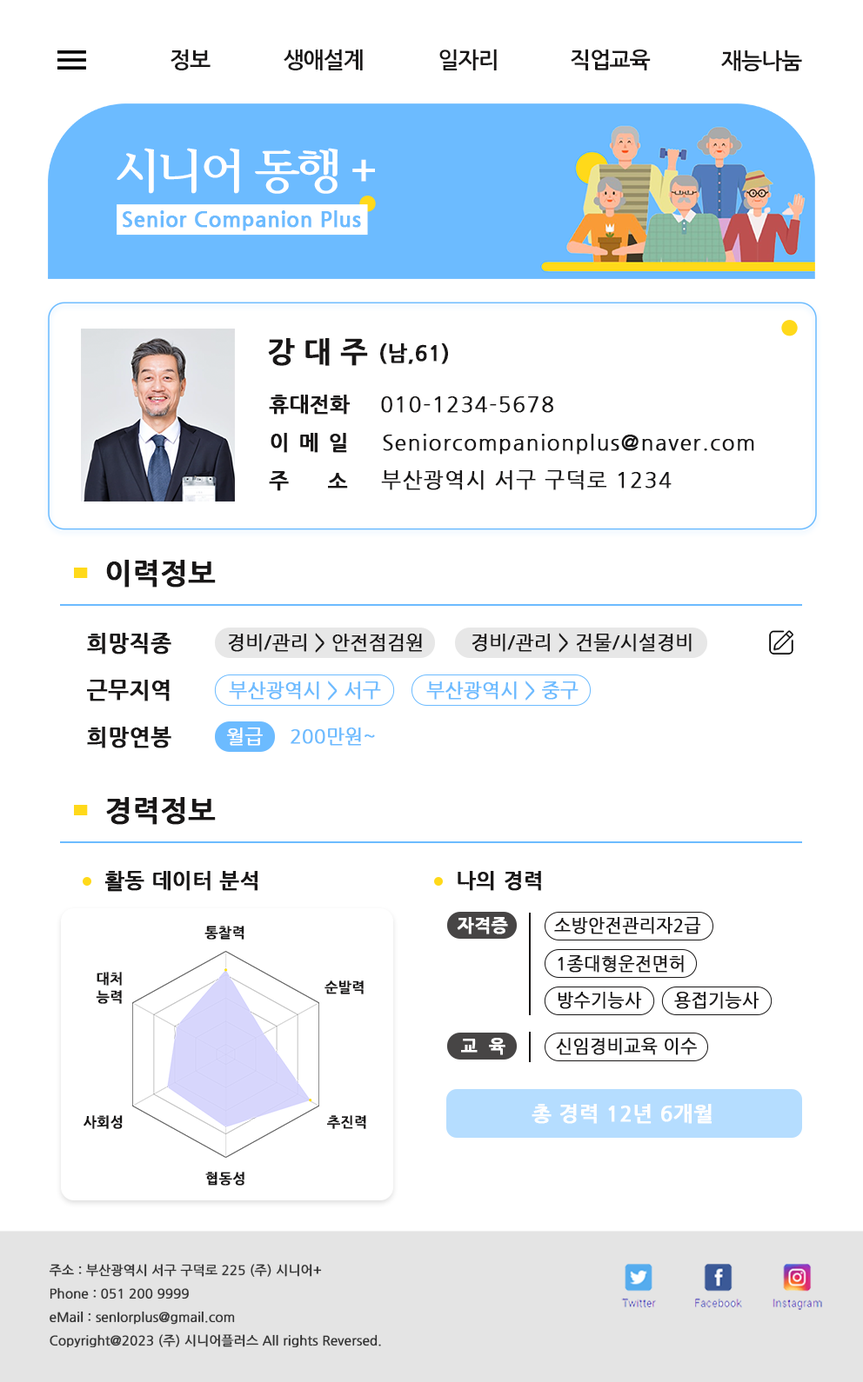
<style>
.page{position:relative;width:863px;height:1382px;background:#ffffff}
.page>*{position:absolute;margin:0}
.t1{font:22.4px "NanumGothicBold";letter-spacing:-0.05em;color:#191717}
.t2{font:47.9px "HCRBatang-Bold";letter-spacing:-0.075em;color:#ffffff}
.t3{font:20.9px "NanumGothicBold";letter-spacing:0.01em;color:#6cbbff;font-weight:bold}
.t4{font:28.7px "NanumGothicBold";color:#191717;font-weight:bold}
.t5{font:20.9px "NanumGothicBold";letter-spacing:0.01em;color:#191717;font-weight:bold}
.t6{font:20.9px "NanumGothicBold";color:#191717;font-weight:bold}
.t7{font:20.9px "NanumGothic";letter-spacing:0.05em;color:#191717;font-weight:bold}
.t8{font:20.9px "NanumGothicBold";letter-spacing:0.075em;color:#191717;font-weight:bold}
.t9{font:20.9px "NanumGothicBold";letter-spacing:0.05em;color:#191717;font-weight:bold}
.t10{font:28.7px "NanumGothicBold";letter-spacing:0.01em;color:#191717;font-weight:bold}
.t11{font:21.7px "NanumGothicBold";letter-spacing:0.01em;color:#191717;font-weight:bold}
.t12{font:19.1px "NanumGothic";color:#191717;font-weight:bold}
.t13{font:19.1px "NanumGothic";color:#6cbbff;font-weight:bold}
.t14{font:19.1px "NanumGothic";color:#ffffff;font-weight:bold}
.t15{font:17.4px "NanumGothicBold";letter-spacing:0.01em;color:#ffffff;font-weight:bold}
.t16{font:17.4px "NanumGothic";letter-spacing:0.01em;color:#191717;font-weight:bold}
.t17{font:14.1px "NanumGothicBold";letter-spacing:0.01em;color:#191717;font-weight:bold}
.t18{font:14.1px/11px "NanumGothicBold";letter-spacing:0.01em;color:#191717;font-weight:bold}
.t19{font:20.9px "NanumGothicBold";letter-spacing:0.01em;color:#fffefe;font-weight:bold}
.t20{font:12.8px "NanumGothic";color:#333333;font-weight:bold}
</style>
<div class="page">
<p class="t1" style="left:170px;top:49px;width:40px;height:21px">정보</p>
<p class="t1" style="left:283px;top:49px;width:80px;height:21px">생애설계</p>
<p class="t1" style="left:439px;top:49px;width:57px;height:21px">일자리</p>
<p class="t1" style="left:570px;top:49px;width:80px;height:21px">직업교육</p>
<p class="t1" style="left:721px;top:50px;width:81px;height:21px">재능나눔</p>
<p class="t2" style="left:117px;top:148px;width:258px;height:46px">시니어 동행 +</p>
<p class="t3" style="left:123px;top:210px;width:238px;height:21px">Senior Companion Plus</p>
<p class="t4" style="left:268px;top:338px;width:100px;height:28px">강 대 주</p>
<p class="t5" style="left:380px;top:343px;width:68px;height:21px">(남,61)</p>
<p class="t6" style="left:269px;top:395px;width:81px;height:20px">휴대전화</p>
<p class="t7" style="left:381px;top:396px;width:172px;height:17px">010-1234-5678</p>
<p class="t8" style="left:270px;top:433px;width:77px;height:20px">이 메 일</p>
<p class="t7" style="left:383px;top:434px;width:371px;height:21px">Seniorcompanionplus@naver.com</p>
<p class="t9" style="left:269px;top:471px;width:79px;height:20px">주     소</p>
<p class="t7" style="left:381px;top:470px;width:290px;height:20px">부산광역시 서구 구덕로 1234</p>
<p class="t10" style="left:106px;top:560px;width:110px;height:28px">이력정보</p>
<p class="t11" style="left:87px;top:633px;width:84px;height:22px">희망직종</p>
<p class="t12" style="left:228px;top:633px;width:194px;height:20px">경비/관리 &gt; 안전점검원</p>
<p class="t12" style="left:471px;top:633px;width:220px;height:20px">경비/관리 &gt; 건물/시설경비</p>
<p class="t11" style="left:87px;top:680px;width:83px;height:22px">근무지역</p>
<p class="t13" style="left:229px;top:681px;width:152px;height:20px">부산광역시 &gt; 서구</p>
<p class="t13" style="left:426px;top:681px;width:152px;height:20px">부산광역시 &gt; 중구</p>
<p class="t11" style="left:87px;top:727px;width:84px;height:22px">희망연봉</p>
<p class="t14" style="left:226px;top:728px;width:37px;height:18px">월급</p>
<p class="t13" style="left:290px;top:728px;width:85px;height:18px">200만원~</p>
<p class="t10" style="left:106px;top:797px;width:110px;height:28px">경력정보</p>
<p class="t5" style="left:104px;top:871px;width:153px;height:21px">활동 데이터 분석</p>
<p class="t5" style="left:457px;top:871px;width:84px;height:20px">나의 경력</p>
<p class="t15" style="left:456px;top:917px;width:52px;height:18px">자격증</p>
<p class="t16" style="left:554px;top:917px;width:147px;height:18px">소방안전관리자2급</p>
<p class="t17" style="left:204px;top:926px;width:40px;height:14px">통찰력</p>
<p class="t16" style="left:557px;top:956px;width:126px;height:17px">1종대형운전면허</p>
<p class="t18" style="left:96px;top:972px;width:26px;height:32px">대처<br>능력</p>
<p class="t17" style="left:324px;top:981px;width:39px;height:14px">순발력</p>
<p class="t16" style="left:557px;top:992px;width:85px;height:17px">방수기능사</p>
<p class="t16" style="left:674px;top:992px;width:85px;height:17px">용접기능사</p>
<p class="t15" style="left:461px;top:1038px;width:44px;height:18px">교  육</p>
<p class="t16" style="left:556px;top:1038px;width:140px;height:18px">신임경비교육 이수</p>
<p class="t19" style="left:531px;top:1104px;width:180px;height:20px">총 경력 12년 6개월</p>
<p class="t17" style="left:83px;top:1116px;width:40px;height:13px">사회성</p>
<p class="t17" style="left:327px;top:1116px;width:39px;height:13px">추진력</p>
<p class="t17" style="left:205px;top:1172px;width:39px;height:14px">협동성</p>
<p class="t20" style="left:49px;top:1264px;width:332px;height:84px">주소 : 부산광역시 서구 구덕로 225 (주) 시니어+<br>Phone : 051 200 9999<br>eMail : senIorplus@gmail.com<br>Copyright@2023 (주) 시니어플러스 All rights Reversed.</p>
</div>
